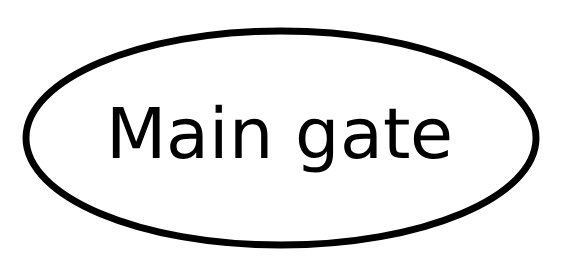
<style>
.page{position:relative;width:584px;height:279px;background:#ffffff}
.page>*{position:absolute;margin:0}
.t1{font:70px "DejaVuSans";color:#000000}
</style>
<div class="page">
<p class="t1" style="left:112px;top:104px;width:338px;height:69px">Main gate</p>
</div>
